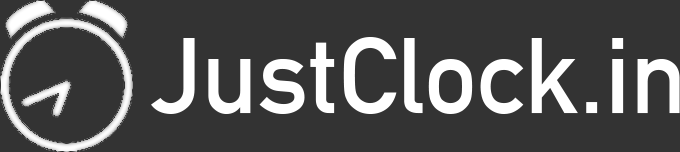
<style>
.page{position:relative;width:680px;height:152px;background:#333333}
.page>*{position:absolute;margin:0}
.t1{font:106px "DINAlternate-Bold";color:#ffffff}
</style>
<div class="page">
<p class="t1" style="left:151px;top:37px;width:529px;height:77px">JustClock.in</p>
</div>
